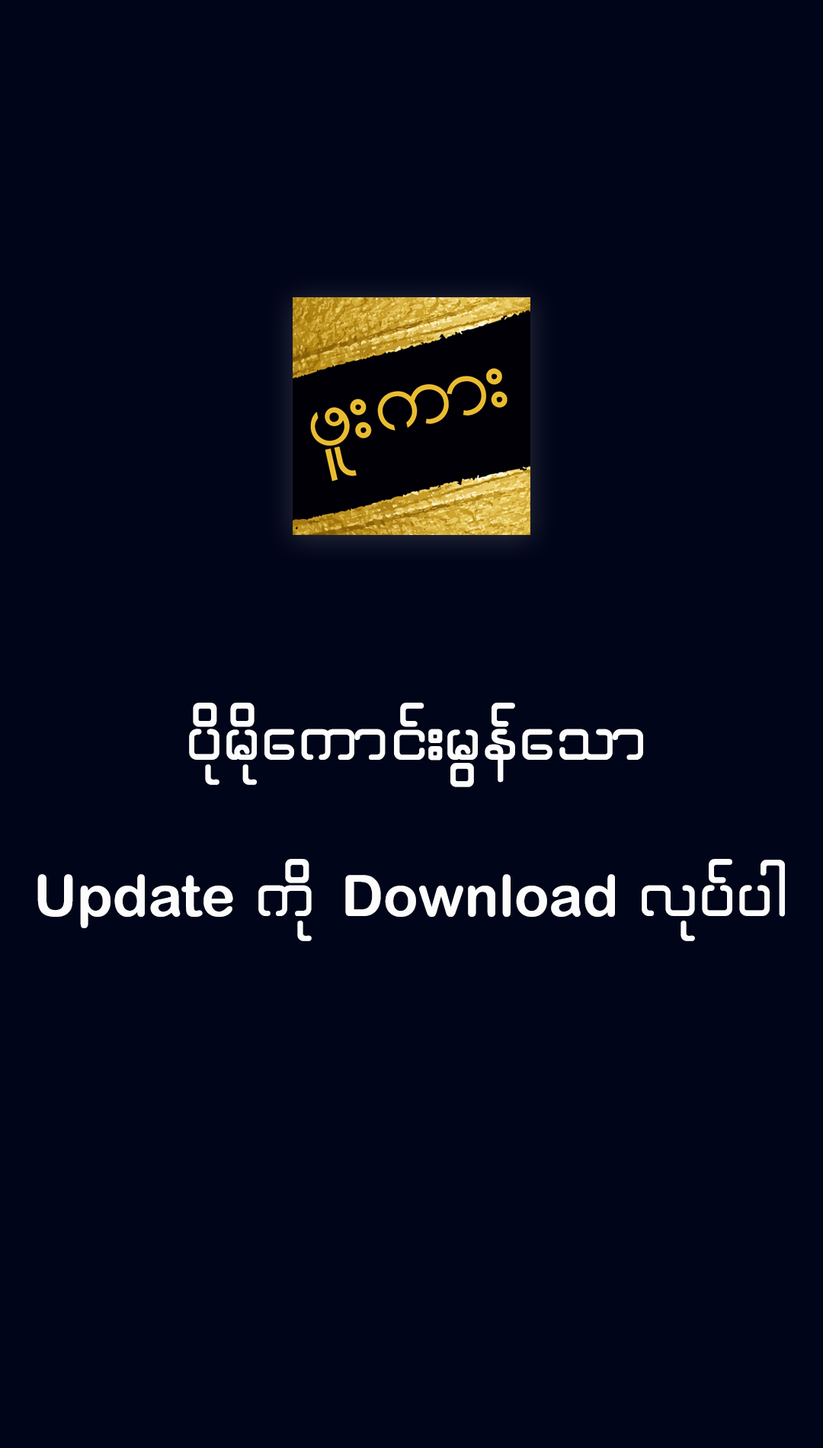
<style>
.page{position:relative;width:823px;height:1448px;background:#010519}
.page>*{position:absolute;margin:0}
.t1{font:82.6px "WinSittway";color:#fcfcfc}
.t2{font:57.2px "ArialRoundedMTBold";color:#fcfcfc}
</style>
<div class="page">
<p class="t1" style="left:189px;top:703px;width:454px;height:84px">ydkrdkaumif;rGefaom</p>
<p class="t2" style="left:37px;top:859px;width:748px;height:82px">Update <span class="t1">udk </span>Download <span class="t1">vkyfyg</span></p>
</div>
